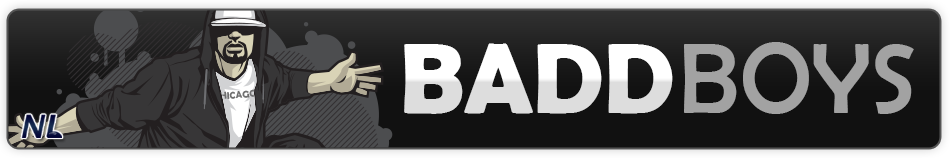
<style>
.page{position:relative;width:950px;height:158px}
.page>*{position:absolute;margin:0}
.t1{font:100.1px "BerlinSansFBDemi-Bold";color:#eeeeee;text-transform:uppercase}
.t2{font:100.1px "BerlinSansFB-Reg";color:#a2a2a2;text-transform:uppercase}
.t3{font:9.7px "BerlinSansFBDemi-Bold";color:#6f6f6f;text-transform:uppercase}
</style>
<div class="page">
<p class="t1" style="left:404px;top:43px;width:269px;height:71px">Badd</p>
<p class="t2" style="left:684px;top:42px;width:230px;height:72px">Boys</p>
<p class="t3" style="left:213px;top:89px;width:44px;height:11px;rotate:-4deg">Chicago</p>
</div>
